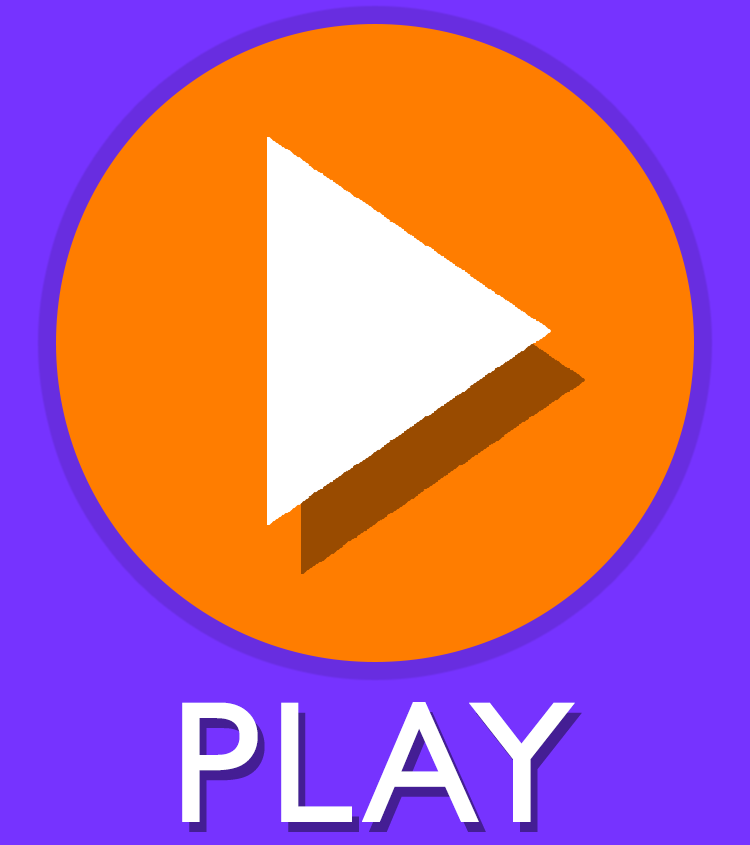
<style>
.page{position:relative;width:750px;height:845px;background:#7633ff}
.page>*{position:absolute;margin:0}
.t1{font:175px "GillSansMT";letter-spacing:0.05em;color:#ffffff}
</style>
<div class="page">
<p class="t1" style="left:182px;top:702px;width:393px;height:120px">PLAY</p>
</div>
